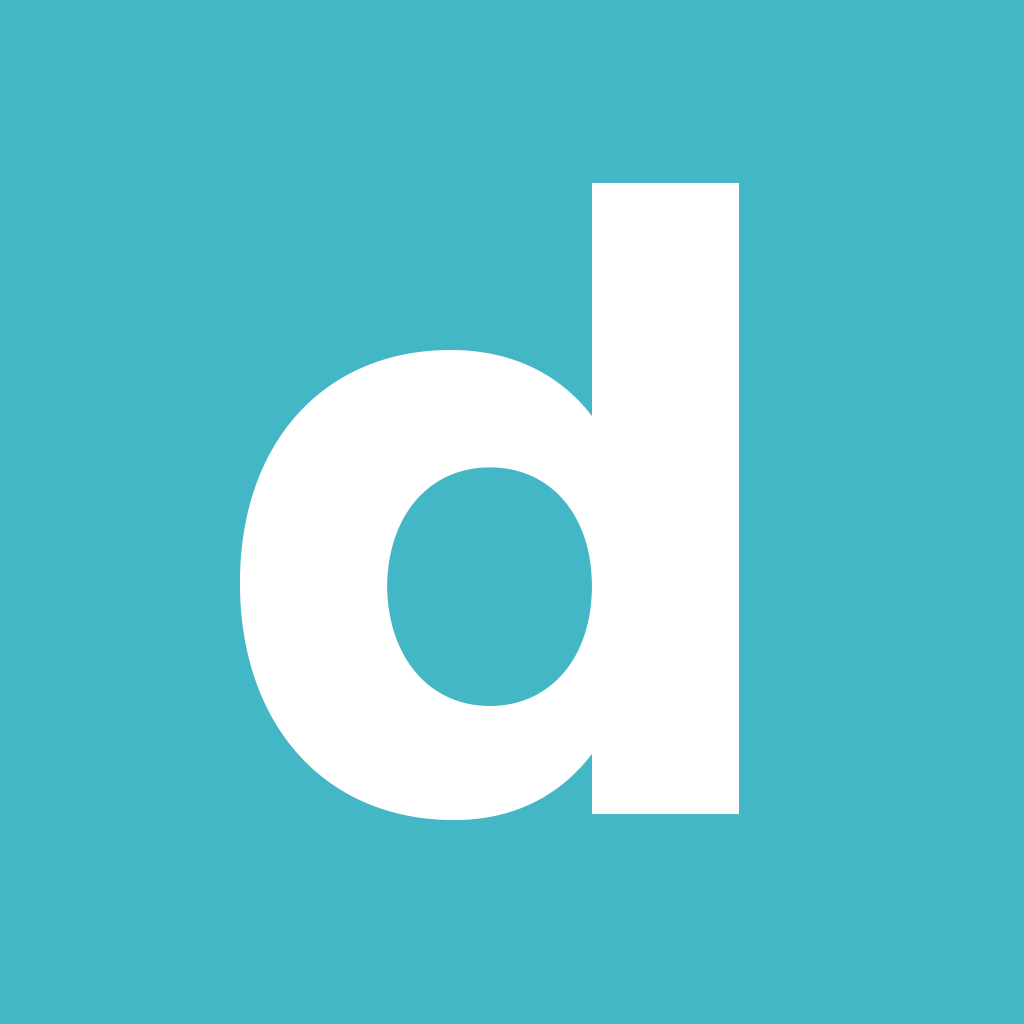
<style>
.page{position:relative;width:1024px;height:1024px;background:#44b7c7}
.page>*{position:absolute;margin:0}
.t1{font:850px "Montserrat-Bold";color:#ffffff}
</style>
<div class="page">
<p class="t1" style="left:240px;top:183px;width:499px;height:638px">d</p>
</div>
